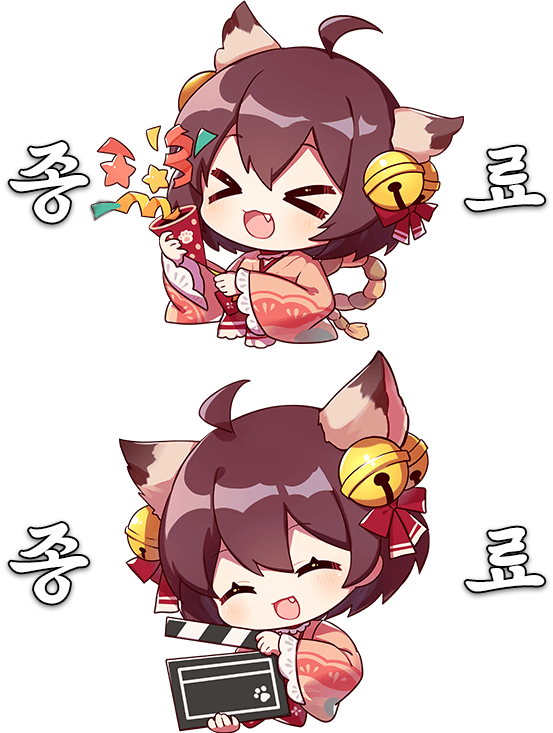
<style>
.page{position:relative;width:553px;height:733px;background:#ffffff}
.page>*{position:absolute;margin:0}
.t1{font:87.5px "SolmoeKimDaeGeonL";letter-spacing:-0.049em;color:#ffffff;font-weight:bold;scale:1.04 1}
</style>
<div class="page">
<p class="t1" style="left:9px;top:142px;width:80px;height:81px">종</p>
<p class="t1" style="left:465px;top:146px;width:80px;height:65px">료</p>
<p class="t1" style="left:9px;top:523px;width:80px;height:81px">종</p>
<p class="t1" style="left:465px;top:527px;width:80px;height:65px">료</p>
</div>
